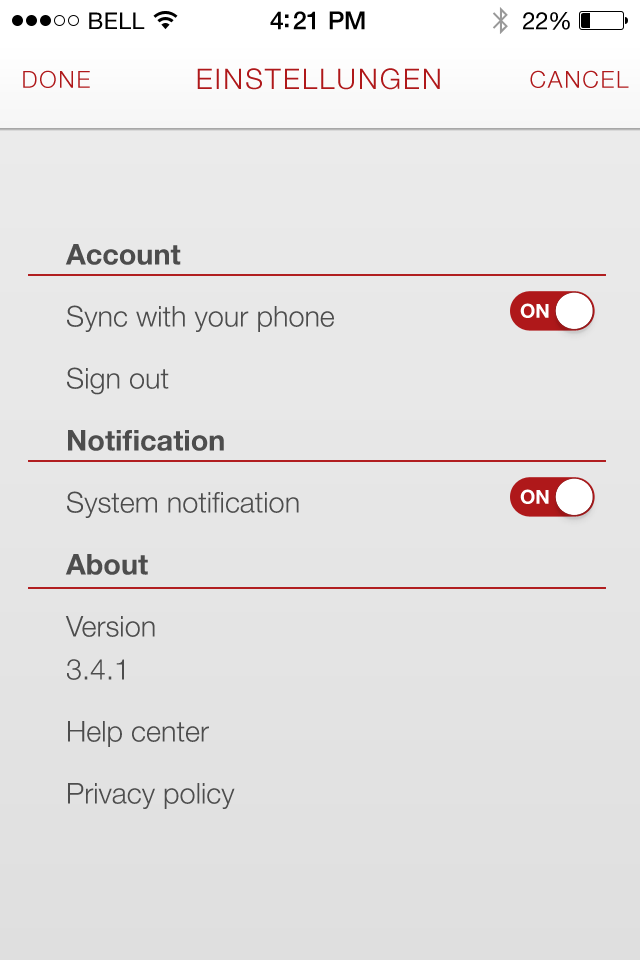
<style>
.page{position:relative;width:640px;height:960px}
.page>*{position:absolute;margin:0}
.t1{font:23px "HelveticaNeue";letter-spacing:0.02em;color:#000000}
.t2{font:25px "HelveticaNeue-Medium";letter-spacing:-0.02em;color:#000000}
.t3{font:24px "HelveticaNeue";letter-spacing:-0.02em;color:#000000}
.t4{font:23.4px "HelveticaNeue-Light";letter-spacing:0.08em;color:#af181a}
.t5{font:28.4px "HelveticaNeue-Light";letter-spacing:0.08em;color:#af181a}
.t6{font:28.7px/62px "HelveticaNeue-Light";color:#4d4d4d}
.t7{font:28.7px/62px "HelveticaNeue-Bold";color:#4d4d4d}
.t8{font:28.7px/43px "HelveticaNeue-Light";color:#4d4d4d}
.t9{font:19.4px "HelveticaNeue-Bold";color:#ffffff}
</style>
<div class="page">
<p class="t1" style="left:89px;top:12px;width:56px;height:17px">BELL</p>
<p class="t2" style="left:270px;top:11px;width:95px;height:19px">4:21 PM</p>
<p class="t3" style="left:522px;top:11px;width:48px;height:19px">22%</p>
<p class="t4" style="left:23px;top:70px;width:67px;height:18px">DONE</p>
<p class="t5" style="left:197px;top:68px;width:243px;height:22px">EINSTELLUNGEN</p>
<p class="t4" style="left:530px;top:70px;width:99px;height:18px">CANCEL</p>
<p class="t6" style="left:65px;top:244px;width:269px;height:565px"><span class="t7">Account<br></span>Sync with your phone<br>Sign out<br><span class="t7">Notification<br></span>System notification<span class="t7"><br>About<br></span>Version<br><span class="t8">3.4.1<br></span>Help center<br>Privacy policy</p>
<p class="t9" style="left:520px;top:303px;width:29px;height:15px">ON</p>
<p class="t9" style="left:520px;top:489px;width:29px;height:15px">ON</p>
</div>
